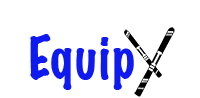
<style>
.page{position:relative;width:200px;height:98px;background:#ffffff}
.page>*{position:absolute;margin:0}
.t1{font:53.1px "MarkerFelt-Thin";color:#0f1af0}
</style>
<div class="page">
<p class="t1" style="left:30px;top:34px;width:104px;height:56px">Equip</p>
</div>
